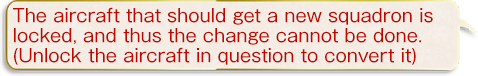
<style>
.page{position:relative;width:478px;height:76px}
.page>*{position:absolute;margin:0}
.t1{font:18px/20px "GothicMB101Pro-Regular";color:#bd0800}
</style>
<div class="page">
<p class="t1" style="left:13px;top:7px;width:420px;height:58px">The aircraft that should get a new squadron is<br>locked, and thus the change cannot be done.<br>(Unlock the aircraft in question to convert it)</p>
</div>
